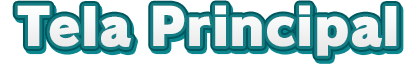
<style>
.page{position:relative;width:420px;height:66px;background:#ffffff}
.page>*{position:absolute;margin:0}
.t1{font:51.7px "RodinPro-UB";color:#f3f4f4}
</style>
<div class="page">
<p class="t1" style="left:17px;top:5px;width:380px;height:51px">Tela Principal</p>
</div>
